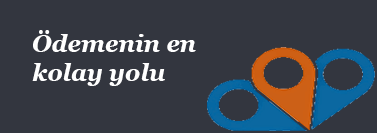
<style>
.page{position:relative;width:377px;height:133px;background:#33363f}
.page>*{position:absolute;margin:0}
.t1{font:24px "Georgia-BoldItalic";color:#ffffff}
</style>
<div class="page">
<p class="t1" style="left:32px;top:30px;width:164px;height:56px">Ödemenin en kolay yolu</p>
</div>
